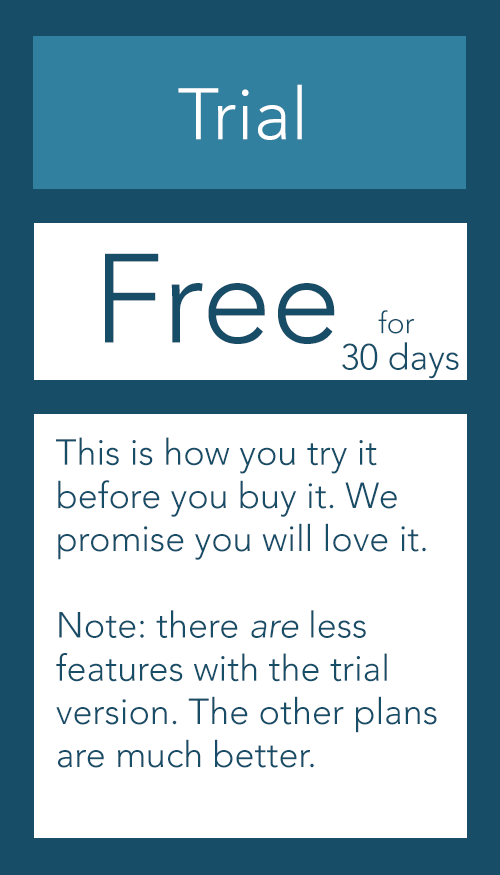
<style>
.page{position:relative;width:500px;height:875px;background:#ffffff}
.page>*{position:absolute;margin:0}
.t1{font:72px "Avenir-Light";color:#ffffff}
.t2{font:125px "Avenir-Light";color:#184d68}
.t3{font:30px "Avenir-Light";color:#184d68}
.t4{font:36px "Avenir-Light";color:#184d68}
.t5{font:36px "Avenir-LightOblique";color:#184d68}
</style>
<div class="page">
<p class="t1" style="left:178px;top:84px;width:124px;height:56px">Trial</p>
<p class="t2" style="left:105px;top:253px;width:230px;height:91px">Free</p>
<p class="t3" style="left:378px;top:310px;width:37px;height:24px">for</p>
<p class="t4" style="left:342px;top:342px;width:117px;height:37px">30 days</p>
<p class="t4" style="left:56px;top:437px;width:381px;height:331px">This is how you try it before you buy it. We promise you will love it.<br><br>Note: there <span class="t5">are</span> less features with the trial version. The other plans are much better.</p>
</div>
